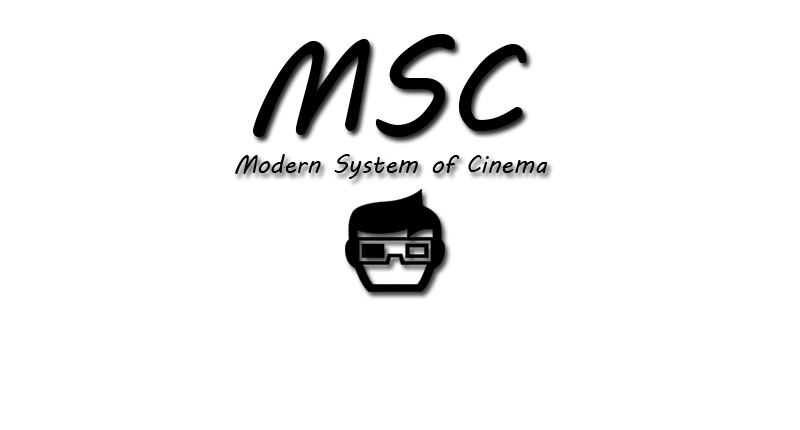
<style>
.page{position:relative;width:800px;height:430px;background:#ffffff}
.page>*{position:absolute;margin:0}
.t1{font:130px "MVBoli";color:#000000}
.t2{font:25px "MVBoli";color:#000000}
</style>
<div class="page">
<p class="t1" style="left:253px;top:34px;width:274px;height:103px">MSC</p>
<p class="t2" style="left:235px;top:154px;width:313px;height:25px">Modern System of Cinema</p>
</div>
